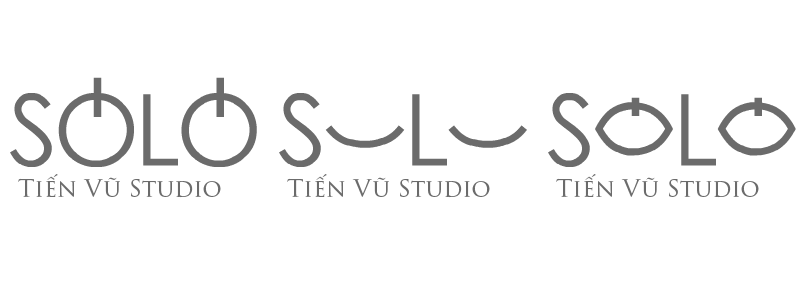
<style>
.page{position:relative;width:807px;height:302px;background:#ffffff}
.page>*{position:absolute;margin:0}
.t1{font:24px "TrajanPro3-Regular";color:#6b6b6b}
</style>
<div class="page">
<p class="t1" style="left:18px;top:174px;width:203px;height:24px">Tiến Vũ Studio</p>
<p class="t1" style="left:287px;top:174px;width:203px;height:24px">Tiến Vũ Studio</p>
<p class="t1" style="left:556px;top:174px;width:203px;height:24px">Tiến Vũ Studio</p>
</div>
